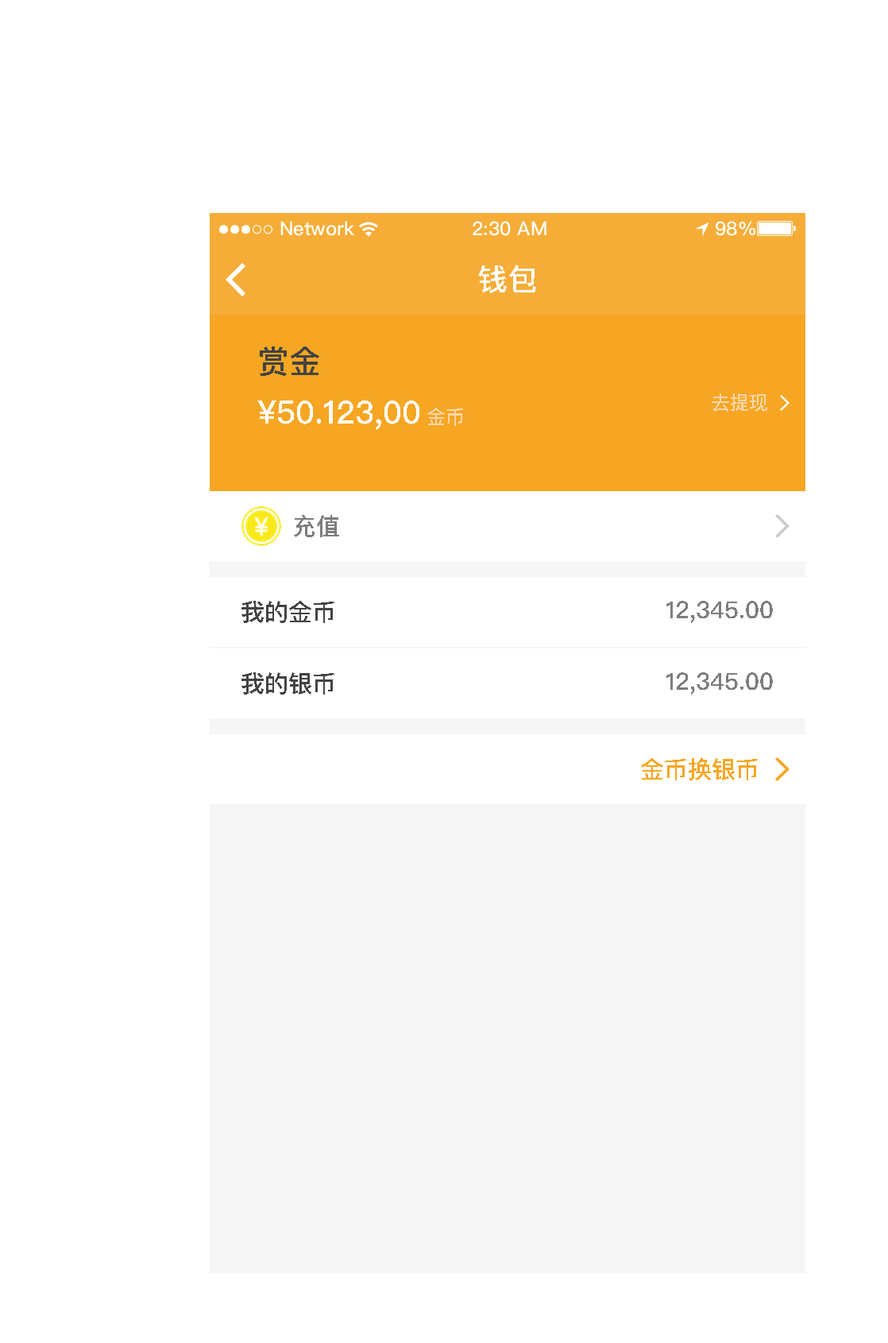
<style>
.page{position:relative;width:888px;height:1343px;background:#ffffff}
.page>*{position:absolute;margin:0}
.t1{font:30.2px "PingFangSC-Medium";color:#ffffff;text-transform:uppercase}
.t2{font:31.8px "PingFangSC-Medium";color:#434343;text-transform:uppercase}
.t3{font:31.8px "PingFangSC-Medium";color:#ffffff;text-transform:uppercase}
.t4{font:19.1px "PingFangSC-Medium";color:#fbd6aa;text-transform:uppercase}
.t5{font:23.8px "PingFangSC-Medium";color:#7d7d7d;text-transform:uppercase}
.t6{font:23.8px "PingFangSC-Medium";color:#434343;text-transform:uppercase}
.t7{font:23.8px "PingFangSC-Medium";color:#f6a623;text-transform:uppercase}
</style>
<div class="page">
<p class="t1" style="left:478px;top:265px;width:58px;height:28px">钱包</p>
<p class="t2" style="left:260px;top:346px;width:59px;height:30px">赏金</p>
<p class="t3" style="left:257px;top:400px;width:162px;height:30px">¥50.123,00</p>
<p class="t4" style="left:712px;top:393px;width:55px;height:19px">去提现</p>
<p class="t4" style="left:427px;top:408px;width:36px;height:18px">金币</p>
<p class="t5" style="left:294px;top:515px;width:45px;height:22px">充值</p>
<p class="t6" style="left:242px;top:601px;width:92px;height:22px">我的金币</p>
<p class="t5" style="left:667px;top:601px;width:106px;height:22px">12,345.00</p>
<p class="t6" style="left:242px;top:672px;width:92px;height:22px">我的银币</p>
<p class="t5" style="left:667px;top:672px;width:106px;height:22px">12,345.00</p>
<p class="t7" style="left:641px;top:758px;width:117px;height:22px">金币换银币</p>
</div>
